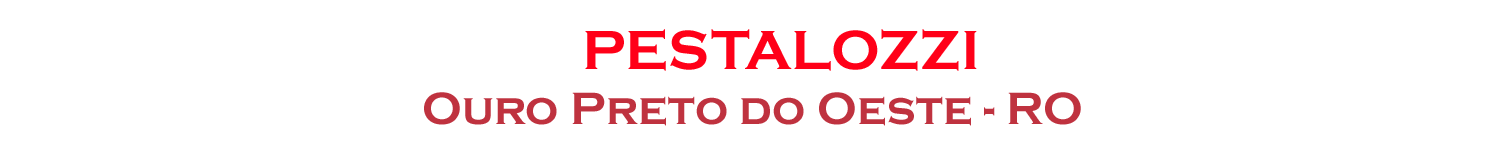
<style>
.page{position:relative;width:1500px;height:150px;background:#ffffff}
.page>*{position:absolute;margin:0}
.t1{font:57.1px "CopperplateGothic-Bold";color:#ff0018}
.t2{font:46.7px "CopperplateGothic-Bold";color:#bf323f}
</style>
<div class="page">
<p class="t1" style="left:585px;top:29px;width:392px;height:42px">PESTALOZZI</p>
<p class="t2" style="left:424px;top:92px;width:657px;height:34px">Ouro Preto do Oeste - RO</p>
</div>
